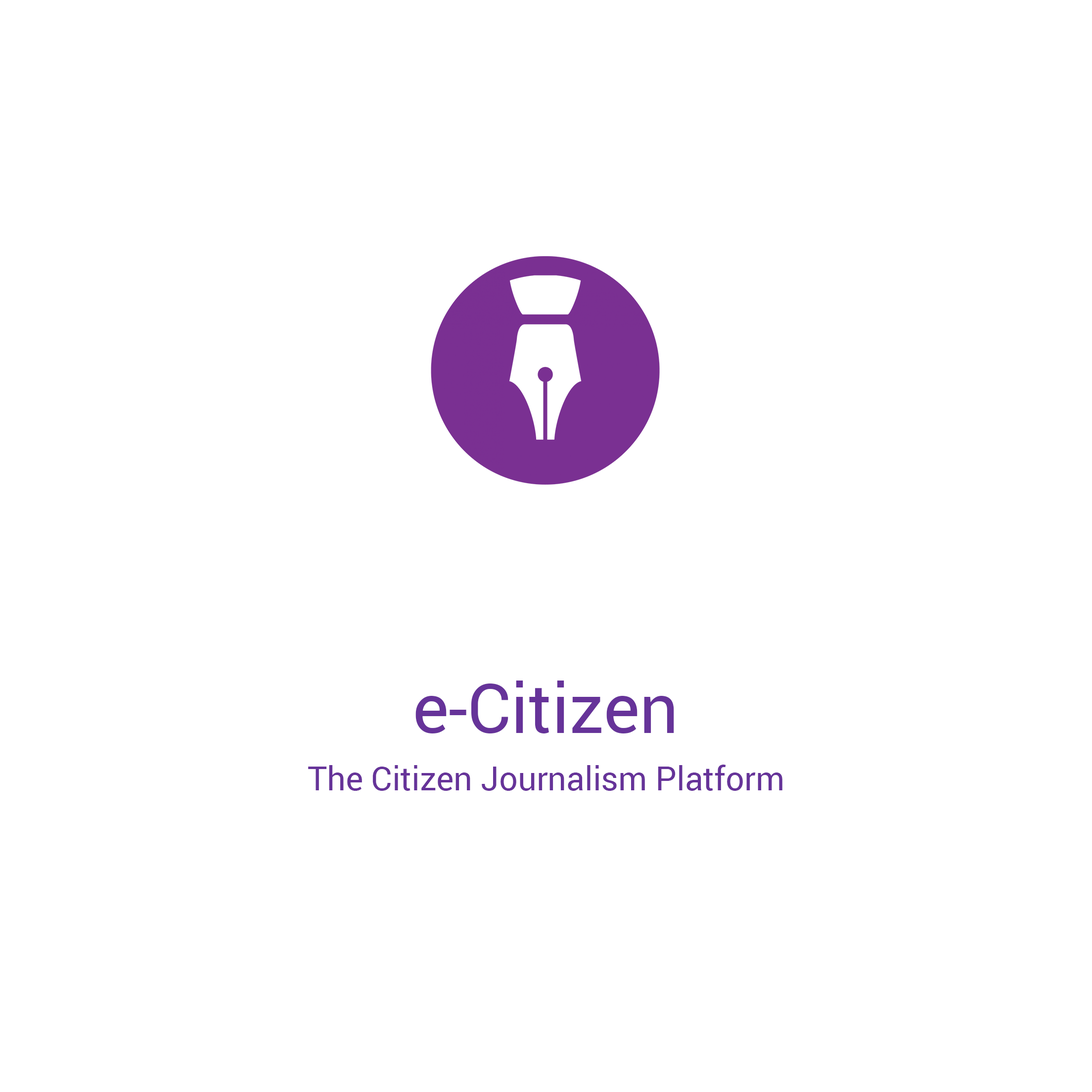
<style>
.page{position:relative;width:1092px;height:1092px;background:#ffffff}
.page>*{position:absolute;margin:0}
.t1{font:68.7px "Roboto-Regular";color:#663399}
.t2{font:33px "Roboto-Regular";color:#663399}
</style>
<div class="page">
<p class="t1" style="left:415px;top:681px;width:259px;height:52px">e-Citizen</p>
<p class="t2" style="left:308px;top:765px;width:474px;height:26px">The Citizen Journalism Platform</p>
</div>
